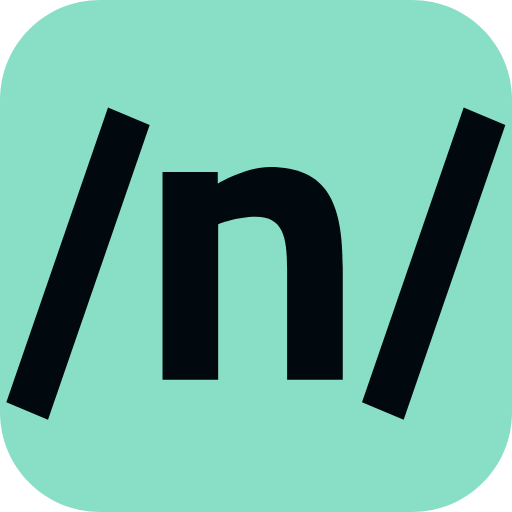
<style>
.page{position:relative;width:512px;height:512px;background:#89dec6}
.page>*{position:absolute;margin:0}
.t1{font:415.3px "Titillium-Bold";letter-spacing:-0.037em;color:#01090e;scale:0.85 1}
.t2{font:415.3px "Titillium-Bold";letter-spacing:-0.037em;color:#01090e}
</style>
<div class="page">
<p class="t1" style="left:6px;top:107px;width:500px;height:313px">/<span class="t2">n</span>/</p>
</div>
